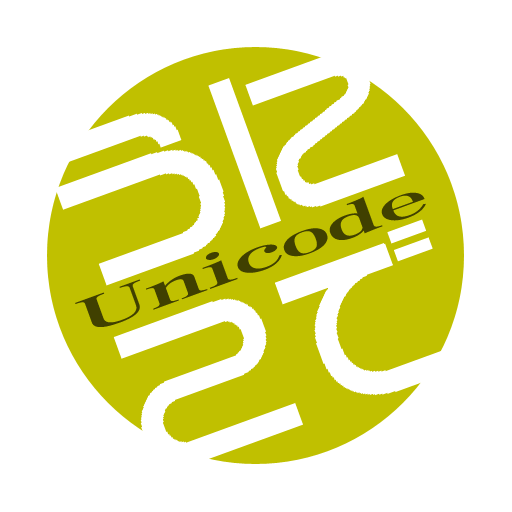
<style>
.page{position:relative;width:512px;height:512px;background:#ffffff}
.page>*{position:absolute;margin:0}
.t1{font:45px "RFPHonMincho-XB-WIN-RKSJ-H";color:#404000;scale:2 1}
</style>
<div class="page">
<p class="t1" style="left:75px;top:192px;width:351px;height:135px;rotate:-20deg">Unicode</p>
</div>
